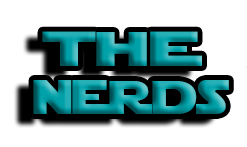
<style>
.page{position:relative;width:247px;height:147px;background:#ffffff}
.page>*{position:absolute;margin:0}
.t1{font:48.3px "StarJedi";scale:1.61 1}
.t2{font:47.6px "StarJedi";scale:1.18 1}
</style>
<div class="page">
<p class="t1" style="left:42px;top:31px;width:160px;height:35px">the</p>
<p class="t2" style="left:33px;top:80px;width:196px;height:34px">nerds</p>
</div>
